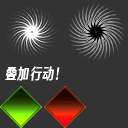
<style>
.page{position:relative;width:128px;height:128px;background:#333333}
.page>*{position:absolute;margin:0}
.t1{font:14.9px "FZYASHS_ZHONG--GB1-0";letter-spacing:0.1em;color:#ffffff;font-style:italic;scale:0.76 1}
.t2{font:14.9px "SkipStd-B";letter-spacing:0.1em;color:#ffffff;font-style:italic;scale:0.76 1}
</style>
<div class="page">
<p class="t1" style="left:5px;top:66px;width:55px;height:15px">叠加行动<span class="t2">!</span></p>
</div>
